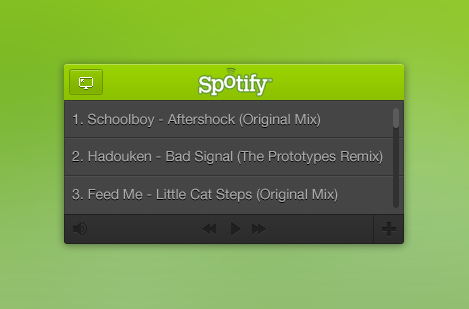
<style>
.page{position:relative;width:469px;height:309px}
.page>*{position:absolute;margin:0}
.t1{font:14px "HelveticaNeue";color:#a9a9a9}
</style>
<div class="page">
<p class="t1" style="left:73px;top:113px;width:247px;height:14px">1. Schoolboy - Aftershock (Original Mix)</p>
<p class="t1" style="left:72px;top:150px;width:311px;height:14px">2. Hadouken - Bad Signal (The Prototypes Remix)</p>
<p class="t1" style="left:72px;top:188px;width:266px;height:14px">3. Feed Me - Little Cat Steps (Original Mix)</p>
</div>
